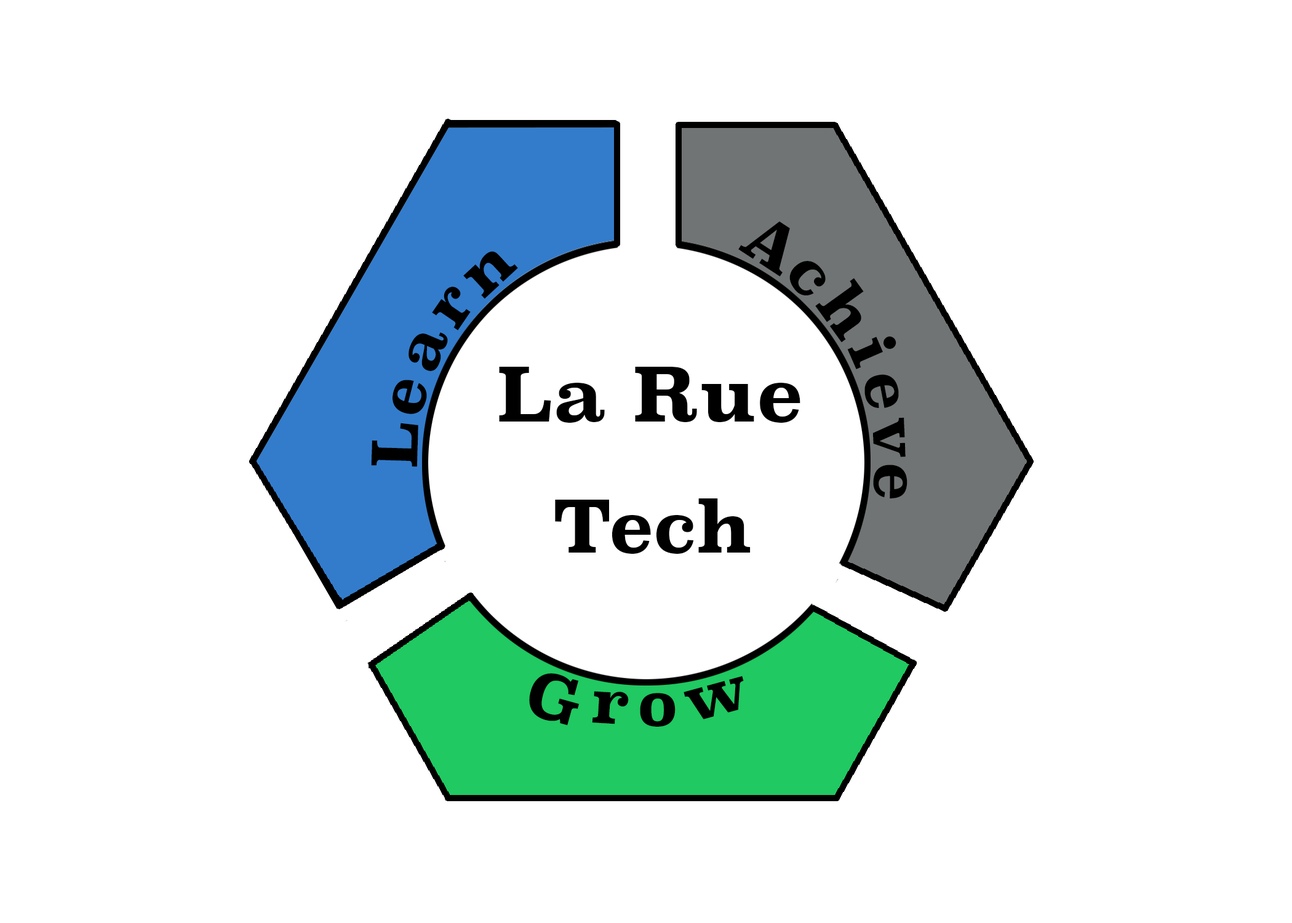
<style>
.page{position:relative;width:1292px;height:923px;background:#ffffff}
.page>*{position:absolute;margin:0}
.t1{font:61.5px "Superclarendon-Bold";color:#000000}
.t2{font:74px "Superclarendon-Bold";color:#000000}
.t3{font:70.6px "Superclarendon-Bold";color:#000000}
</style>
<div class="page">
<p class="t1" style="left:738px;top:221px;width:52px;height:56px;rotate:33deg">A</p>
<p class="t1" style="left:463px;top:251px;width:55px;height:48px;rotate:-43deg">n</p>
<p class="t1" style="left:789px;top:261px;width:37px;height:35px;rotate:49deg">c</p>
<p class="t1" style="left:815px;top:278px;width:49px;height:65px;rotate:54deg">h</p>
<p class="t1" style="left:432px;top:287px;width:39px;height:43px;rotate:-56deg">r</p>
<p class="t1" style="left:409px;top:332px;width:39px;height:39px;rotate:-67deg">a</p>
<p class="t1" style="left:847px;top:336px;width:49px;height:33px;rotate:66deg">i</p>
<p class="t2" style="left:499px;top:367px;width:301px;height:56px">La Rue</p>
<p class="t1" style="left:864px;top:374px;width:35px;height:34px;rotate:79deg">e</p>
<p class="t1" style="left:393px;top:380px;width:34px;height:34px;rotate:-76deg">e</p>
<p class="t1" style="left:371px;top:423px;width:47px;height:44px;rotate:-88deg">L</p>
<p class="t1" style="left:872px;top:417px;width:34px;height:40px;rotate:88deg">v</p>
<p class="t1" style="left:873px;top:465px;width:35px;height:33px;rotate:90deg">e</p>
<p class="t3" style="left:555px;top:498px;width:196px;height:56px">Tech</p>
<p class="t1" style="left:529px;top:673px;width:50px;height:52px;rotate:16deg">G</p>
<p class="t1" style="left:684px;top:676px;width:60px;height:43px;rotate:-15deg">w</p>
<p class="t1" style="left:592px;top:691px;width:37px;height:33px;rotate:3deg">r</p>
<p class="t1" style="left:640px;top:693px;width:36px;height:34px">o</p>
</div>
